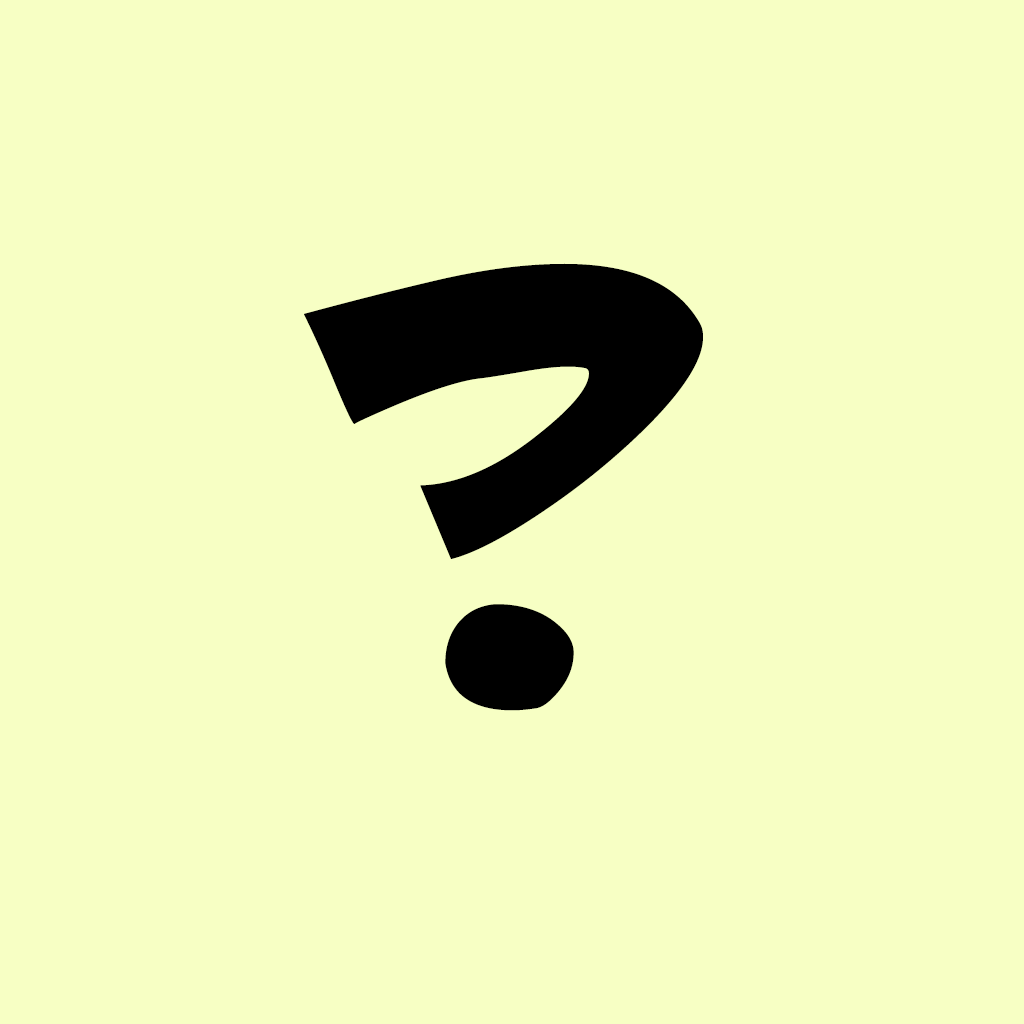
<style>
.page{position:relative;width:1024px;height:1024px;background:#f7ffc4}
.page>*{position:absolute;margin:0}
.t1{font:722.2px "PokemonNormal";letter-spacing:0.075em;color:#000000}
</style>
<div class="page">
<p class="t1" style="left:304px;top:263px;width:399px;height:448px">?</p>
</div>
